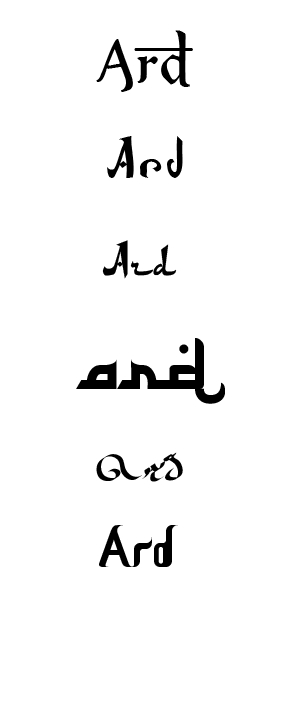
<style>
.page{position:relative;width:300px;height:720px;background:#ffffff}
.page>*{position:absolute;margin:0}
.t1{font:60px "XXIIARABIAN-ONENIGHTSTAND-Bold";color:#000000}
.t2{font:60px "ArabDancesMediumItalic";color:#000000}
.t3{font:60px "DSArabic";color:#000000}
.t4{font:60px "Alhambra";color:#000000}
.t5{font:60px "KaraBenNemsi";color:#000000}
.t6{font:60px "CeriaLebaran";color:#000000}
</style>
<div class="page">
<p class="t1" style="left:96px;top:30px;width:97px;height:62px">Ard</p>
<p class="t2" style="left:107px;top:136px;width:76px;height:42px">Ard</p>
<p class="t3" style="left:102px;top:240px;width:75px;height:39px">Ard</p>
<p class="t4" style="left:76px;top:338px;width:149px;height:66px">ArD}</p>
<p class="t5" style="left:96px;top:452px;width:87px;height:30px">Ard</p>
<p class="t6" style="left:99px;top:525px;width:79px;height:42px">Ard</p>
</div>
